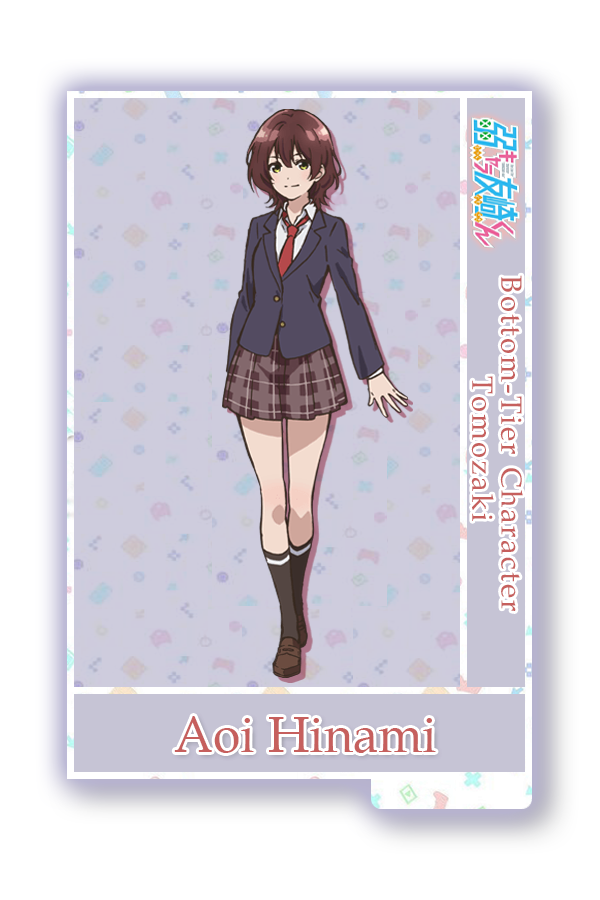
<style>
.page{position:relative;width:600px;height:900px;background:#ffffff}
.page>*{position:absolute;margin:0}
.t1{font:29.2px/29.2px "BookAntiqua";letter-spacing:0.08em;color:#c65f5d}
.t2{font:50px "BookAntiqua";color:#c65f5d}
</style>
<div class="page">
<p class="t1" style="left:471px;top:275px;width:52px;height:336px;text-align:center;rotate:90deg">Bottom-Tier Character <br>Tomozaki</p>
<p class="t2" style="left:174px;top:716px;width:262px;height:37px">Aoi Hinami</p>
</div>
